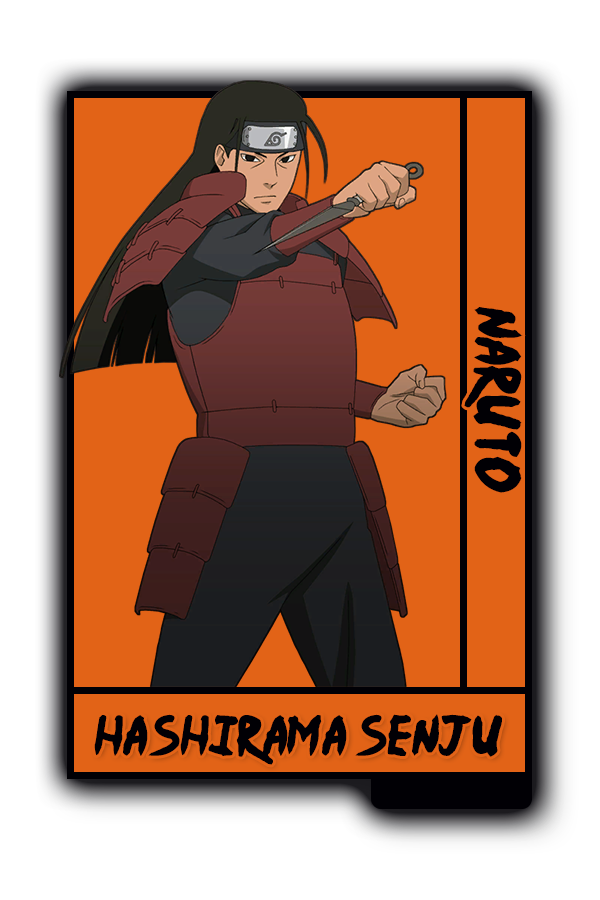
<style>
.page{position:relative;width:600px;height:900px;background:#e26317}
.page>*{position:absolute;margin:0}
.t1{font:52px "Ninja-Naruto";color:#010005}
.t2{font:45.6px "Ninja-Naruto";color:#010005}
</style>
<div class="page">
<p class="t1" style="left:464px;top:307px;width:59px;height:186px;rotate:90deg">Naruto</p>
<p class="t2" style="left:94px;top:714px;width:408px;height:51px">Hashirama Senju</p>
</div>
